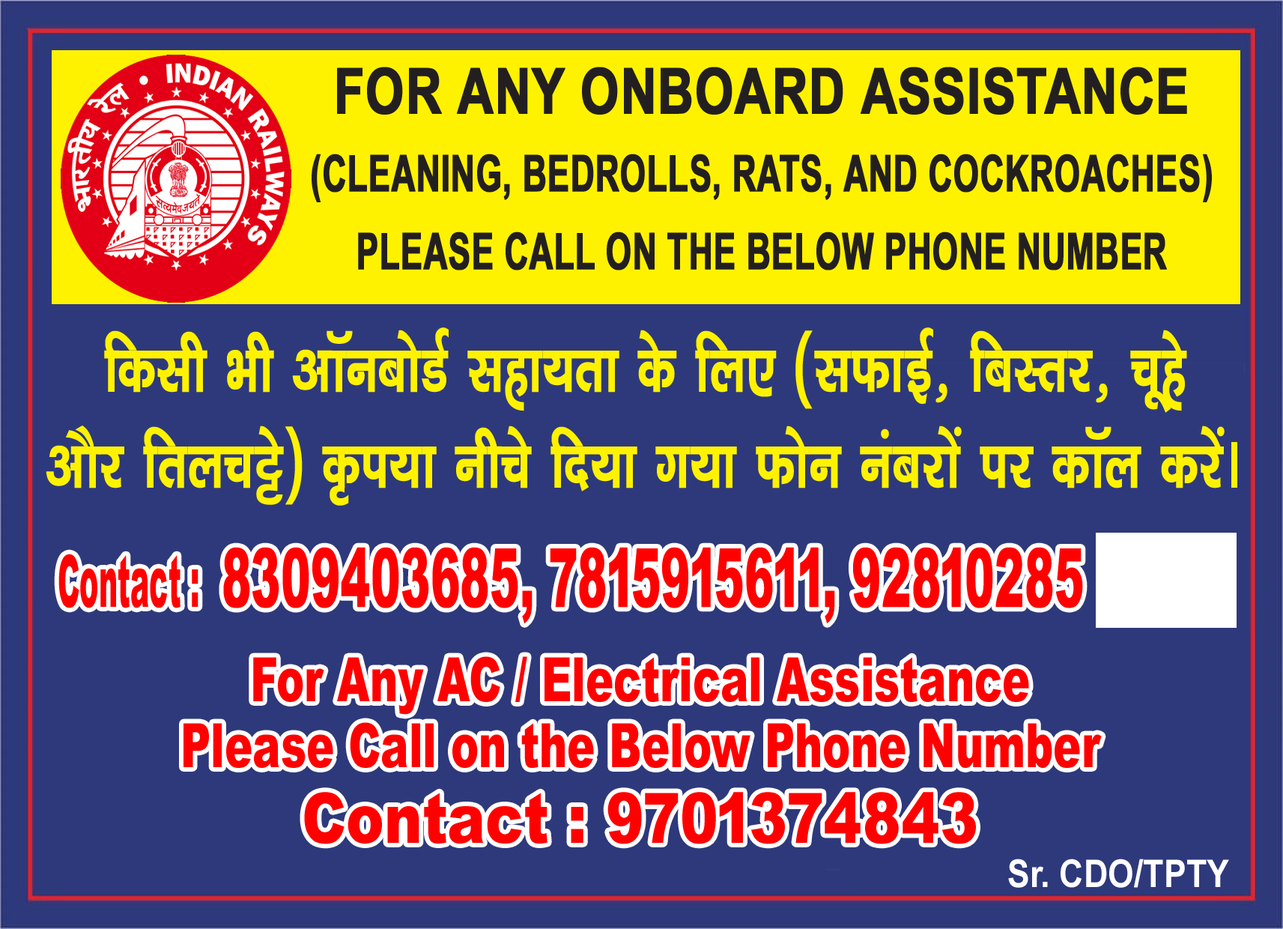
<style>
.page{position:relative;width:1283px;height:929px;background:#2e397b}
.page>*{position:absolute;margin:0}
.t1{font:50.8px/77.8px "Arial-BoldMT";color:#231f20;text-transform:uppercase;font-weight:bold;scale:0.65 1}
.t2{font:63.2px/77.8px "Arial-BoldMT";color:#231f20;text-transform:uppercase;font-weight:bold;scale:0.78 1}
.t3{font:81.7px "Arial-Black";color:#ff0000;scale:0.54 1}
.t4{font:72.1px "Arial-Black";color:#ff0000;scale:0.4 1}
.t5{font:61.3px/66px "Arial-Black";color:#ff0000;scale:0.68 1}
.t6{font:69.5px/76.2px "Arial-Black";color:#ff0000;scale:0.82 1}
.t7{font:38.2px "Arial-BoldMT";color:#ffffff;scale:0.88 1}
</style>
<div class="page">
<p class="t1" style="left:312px;top:67px;width:900px;height:203px;text-align:center"><span class="t2">For Any Onboard Assistance<br></span>(Cleaning, Bedrolls, Rats, and Cockroaches)<br>Please Call on the Below Phone Number</p>
<p class="t3" style="left:58px;top:547px;width:1025px;height:76px"><span class="t4">Contact :  </span>8309403685, 7815915611, 92810285</p>
<p class="t5" style="left:184px;top:656px;width:918px;height:188px;text-align:center">For Any AC / Electrical Assistance<br>Please Call on the Below Phone Number <br><span class="t6">Contact : 9701374843</span></p>
<p class="t7" style="left:1008px;top:859px;width:222px;height:29px">Sr. CDO/TPTY</p>
</div>
